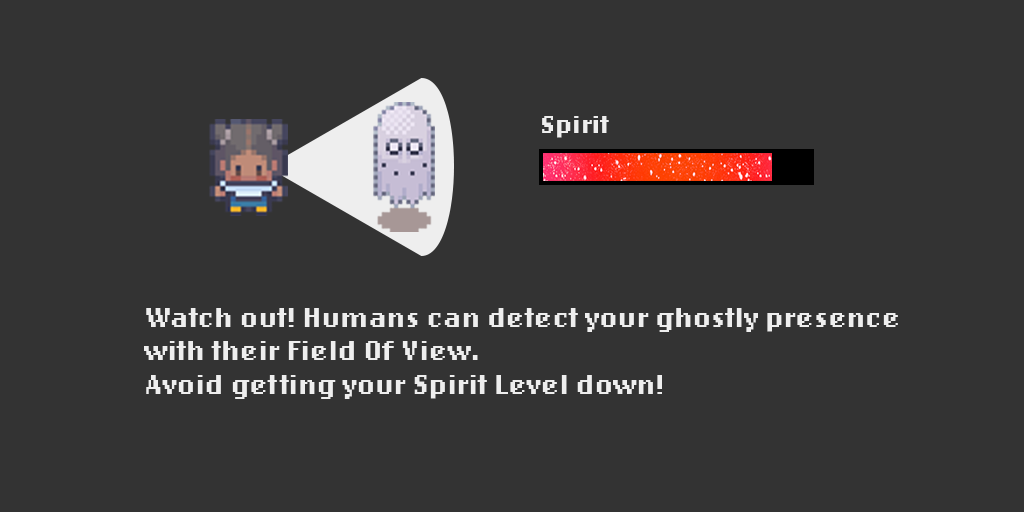
<style>
.page{position:relative;width:1024px;height:512px;background:#333333}
.page>*{position:absolute;margin:0}
.t1{font:25.9px "LoRes12OT-Bold";color:#eeeeee}
.t2{font:28px "LoRes12OT-Bold";color:#eeeeee}
</style>
<div class="page">
<p class="t1" style="left:542px;top:116px;width:67px;height:22px">Spirit</p>
<p class="t2" style="left:144px;top:308px;width:754px;height:91px">Watch out! Humans can detect your ghostly presence<br>with their Field Of View.<br>Avoid getting your Spirit Level down!</p>
</div>
